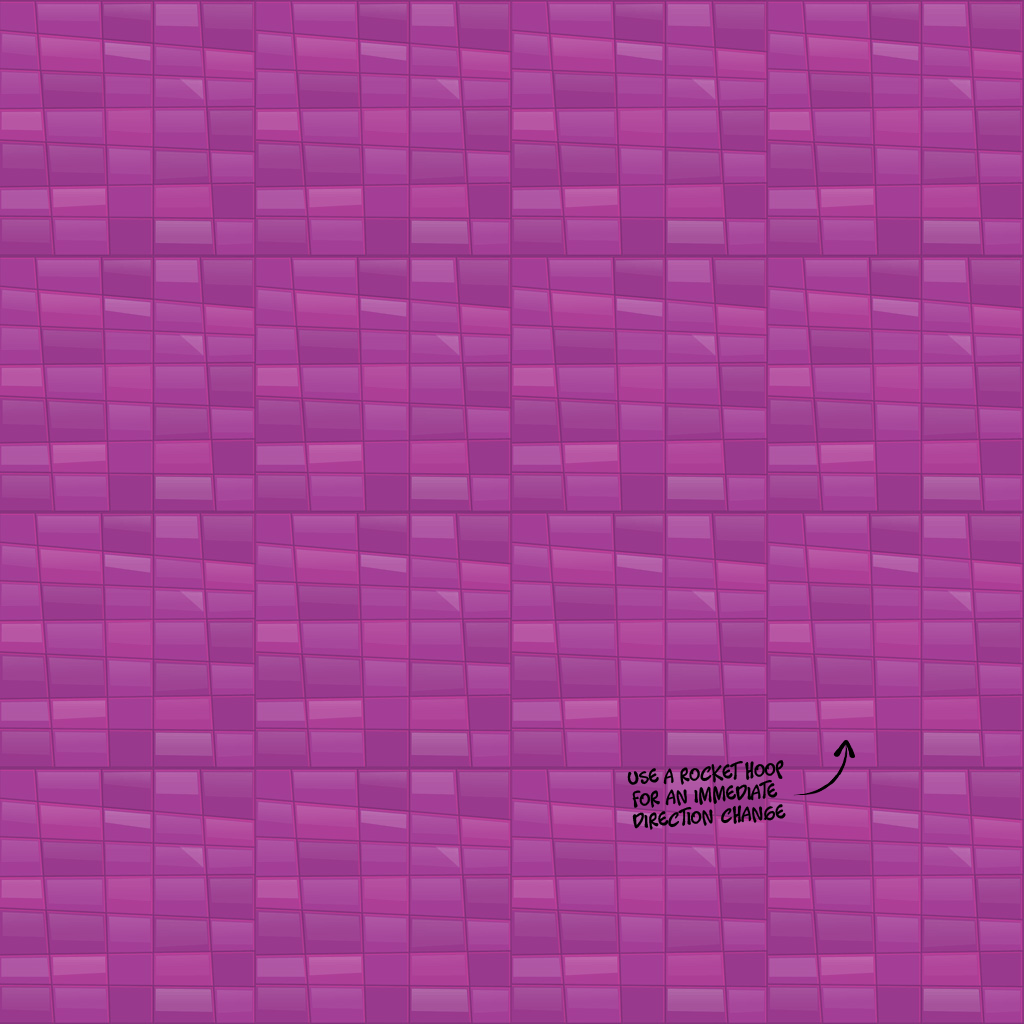
<style>
.page{position:relative;width:1024px;height:1024px}
.page>*{position:absolute;margin:0}
.t1{font:18px "Timotheos";letter-spacing:0.025em;color:#000000}
</style>
<div class="page">
<p class="t1" style="left:627px;top:760px;width:159px;height:70px;text-align:center;rotate:-3deg">use a rocket hoop<br>for an immediate <br>direction change</p>
</div>
